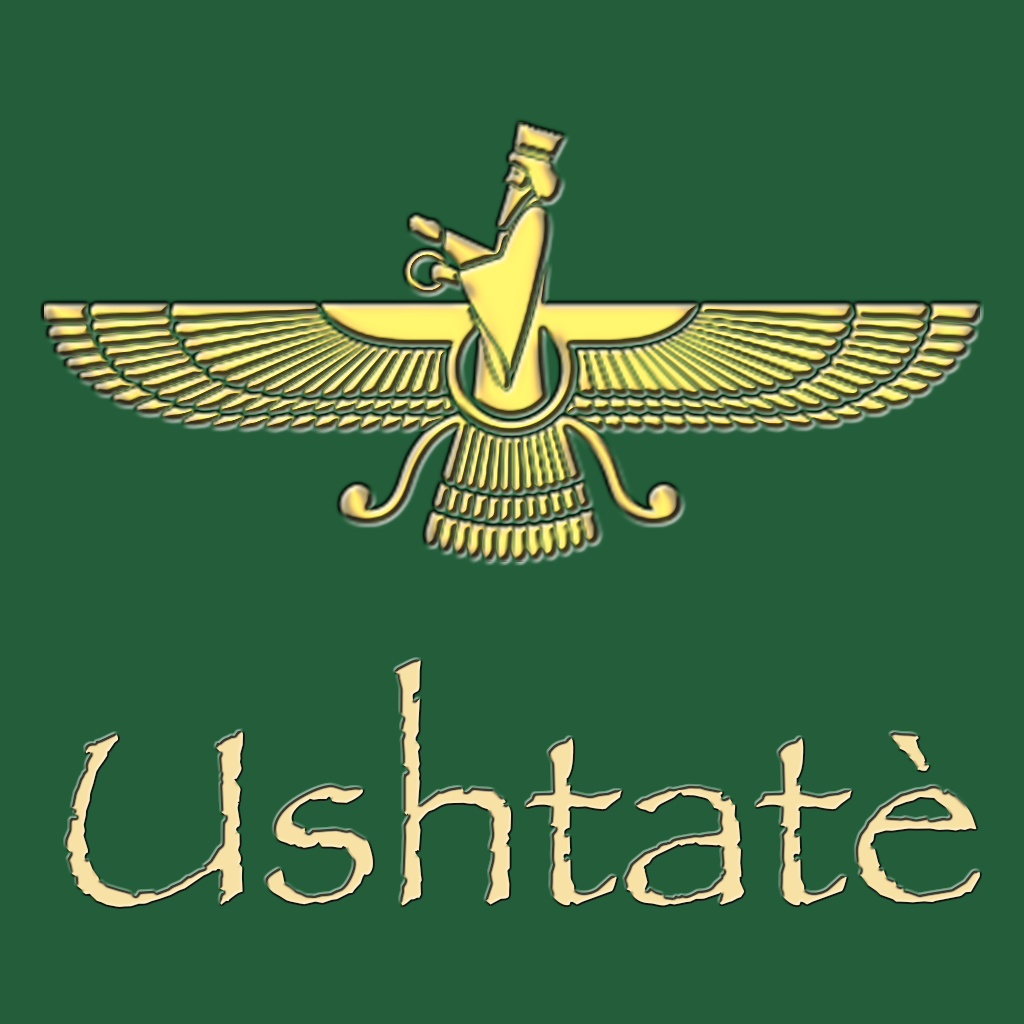
<style>
.page{position:relative;width:1024px;height:1024px;background:#235d39}
.page>*{position:absolute;margin:0}
.t1{font:256px "Papyrus";color:#f7e1a5}
</style>
<div class="page">
<p class="t1" style="left:65px;top:659px;width:915px;height:248px">Ushtatè</p>
</div>
